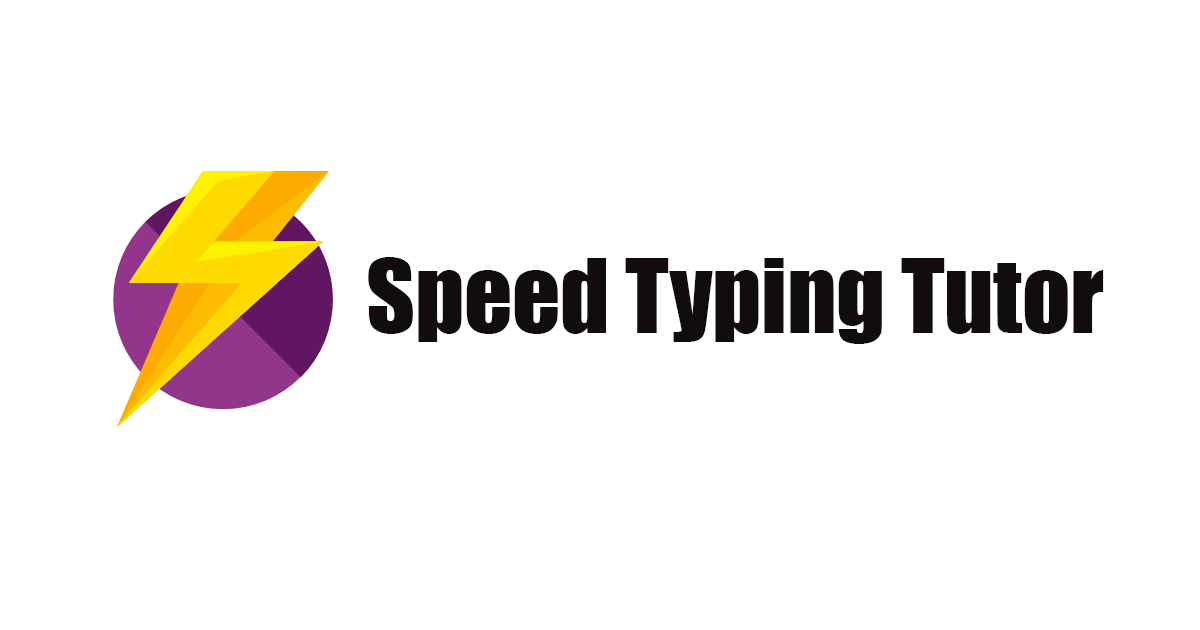
<style>
.page{position:relative;width:1200px;height:630px;background:#ffffff}
.page>*{position:absolute;margin:0}
.t1{font:95px "Impact";letter-spacing:-0.005em;color:#110d0d}
</style>
<div class="page">
<p class="t1" style="left:368px;top:257px;width:736px;height:87px">Speed Typing Tutor</p>
</div>
